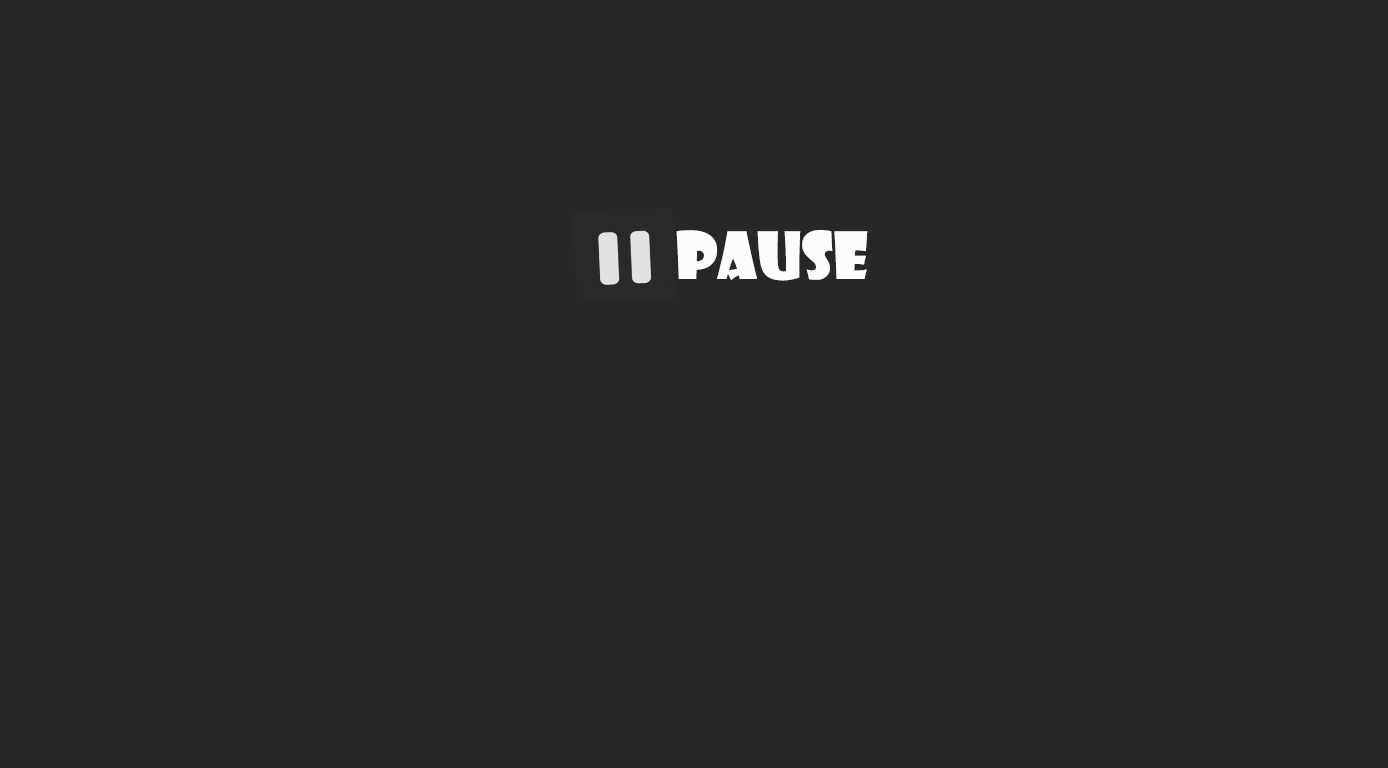
<style>
.page{position:relative;width:1388px;height:768px;background:#282727}
.page>*{position:absolute;margin:0}
.t1{font:63.5px "ShowcardGothic-Reg";color:#fefbfb}
</style>
<div class="page">
<p class="t1" style="left:676px;top:230px;width:192px;height:51px">PAUSE</p>
</div>
